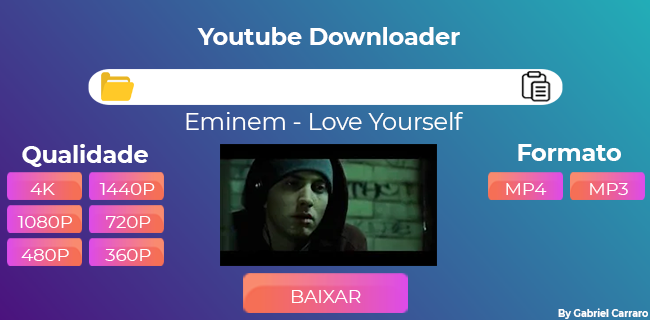
<style>
.page{position:relative;width:650px;height:320px}
.page>*{position:absolute;margin:0}
.t1{font:24px "Montserrat-Bold";letter-spacing:-0.01em;color:#ffffff}
.t2{font:24px "Montserrat-Regular";letter-spacing:-0.01em;color:#ffffff}
.t3{font:17.4px "Montserrat-Regular";letter-spacing:-0.01em;color:#ffffff;scale:1.05 1}
.t4{font:18.8px "Montserrat-Regular";letter-spacing:-0.01em;color:#ffffff}
.t5{font:9.6px "Montserrat-Bold";letter-spacing:-0.01em;color:#ffffff}
</style>
<div class="page">
<p class="t1" style="left:197px;top:27px;width:263px;height:18px">Youtube Downloader</p>
<p class="t2" style="left:186px;top:112px;width:277px;height:18px">Eminem - Love Yourself</p>
<p class="t1" style="left:22px;top:144px;width:126px;height:23px">Qualidade</p>
<p class="t1" style="left:518px;top:144px;width:103px;height:17px">Formato</p>
<p class="t3" style="left:30px;top:183px;width:25px;height:12px">4K</p>
<p class="t3" style="left:99px;top:183px;width:56px;height:12px">1440P</p>
<p class="t3" style="left:506px;top:183px;width:41px;height:12px">MP4</p>
<p class="t3" style="left:590px;top:183px;width:38px;height:12px">MP3</p>
<p class="t3" style="left:17px;top:216px;width:55px;height:12px">1080P</p>
<p class="t3" style="left:106px;top:216px;width:45px;height:12px">720P</p>
<p class="t3" style="left:21px;top:249px;width:48px;height:12px">480P</p>
<p class="t3" style="left:105px;top:249px;width:46px;height:12px">360P</p>
<p class="t4" style="left:292px;top:290px;width:69px;height:13px">BAIXAR</p>
<p class="t5" style="left:558px;top:308px;width:90px;height:11px">By Gabriel Carraro</p>
</div>
